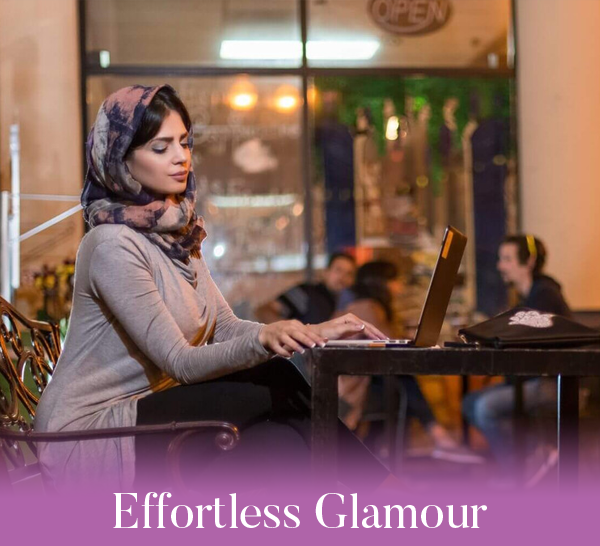
<style>
.page{position:relative;width:600px;height:546px}
.page>*{position:absolute;margin:0}
.t1{font:48px "Butler";color:#ffffff}
</style>
<div class="page">
<p class="t1" style="left:113px;top:492px;width:374px;height:36px">Effortless Glamour</p>
</div>
